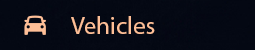
<style>
.page{position:relative;width:255px;height:50px;background:#040813}
.page>*{position:absolute;margin:0}
.t1{font:25px "MyriadPro-Regular";color:#febf97}
</style>
<div class="page">
<p class="t1" style="left:71px;top:16px;width:84px;height:18px">Vehicles</p>
</div>
